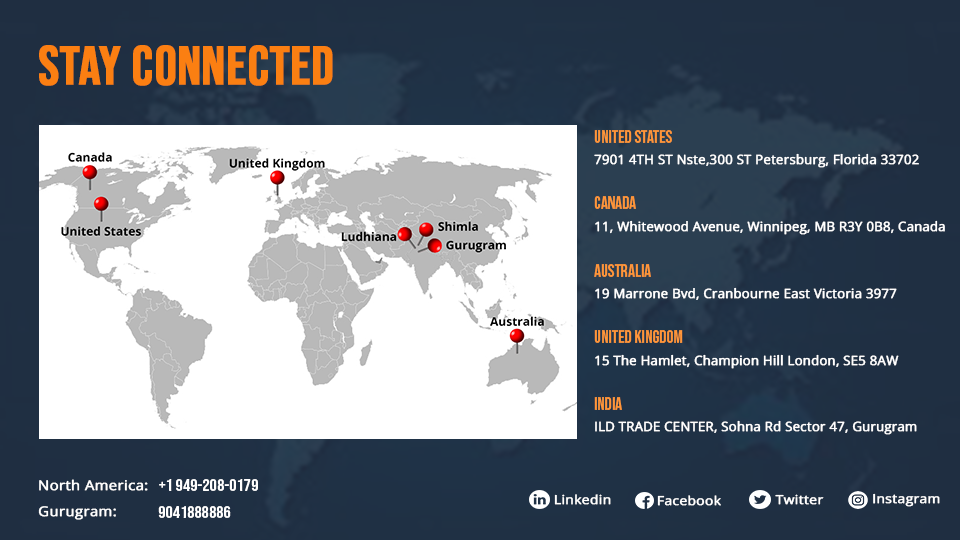
<style>
.page{position:relative;width:960px;height:540px;background:#ffffff}
.page>*{position:absolute;margin:0}
.t1{font:54px "BebasNeue-Regular";color:#fb7f12;font-weight:bold}
.t2{font:17.5px "BebasNeue-Regular";color:#ff9639}
.t3{font:13px "OpenSans-Regular";color:#ffffff;font-weight:bold}
.t4{font:13.6px "OpenSans-Regular";color:#ffffff;font-weight:bold;scale:1.09 1}
.t5{font:16.6px "BebasNeue-Regular";color:#ffffff;scale:1.09 1}
.t6{font:12.4px "OpenSans-Regular";color:#ffffff;font-weight:bold;scale:1.11 1}
</style>
<div class="page">
<p class="t1" style="left:39px;top:45px;width:294px;height:41px">Stay connected</p>
<p class="t2" style="left:594px;top:130px;width:78px;height:13px">United States</p>
<p class="t3" style="left:594px;top:153px;width:325px;height:15px">7901 4TH ST Nste,300 ST Petersburg, Florida 33702</p>
<p class="t2" style="left:594px;top:196px;width:42px;height:13px">Canada</p>
<p class="t3" style="left:595px;top:220px;width:350px;height:15px">11, Whitewood Avenue, Winnipeg, MB R3Y 0B8, Canada</p>
<p class="t2" style="left:594px;top:264px;width:57px;height:13px">Australia</p>
<p class="t3" style="left:595px;top:287px;width:302px;height:13px">19 Marrone Bvd, Cranbourne East Victoria 3977</p>
<p class="t2" style="left:594px;top:330px;width:89px;height:13px">United Kingdom</p>
<p class="t3" style="left:595px;top:354px;width:304px;height:15px">15 The Hamlet, Champion Hill London, SE5 8AW</p>
<p class="t2" style="left:594px;top:397px;width:28px;height:13px">India</p>
<p class="t3" style="left:595px;top:420px;width:322px;height:15px">ILD TRADE CENTER, Sohna Rd Sector 47, Gurugram</p>
<p class="t4" style="left:39px;top:479px;width:109px;height:12px">North America:</p>
<p class="t5" style="left:159px;top:479px;width:99px;height:12px">+1 949-208-0179</p>
<p class="t6" style="left:554px;top:494px;width:57px;height:11px">Linkedin</p>
<p class="t6" style="left:657px;top:495px;width:64px;height:11px">Facebook</p>
<p class="t6" style="left:775px;top:494px;width:49px;height:11px">Twitter</p>
<p class="t6" style="left:873px;top:493px;width:67px;height:14px">Instagram</p>
<p class="t4" style="left:38px;top:506px;width:78px;height:14px">Gurugram:</p>
<p class="t5" style="left:158px;top:506px;width:73px;height:12px">9041888886</p>
</div>
